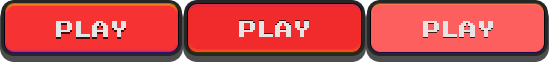
<style>
.page{position:relative;width:549px;height:62px;background:#fd5f5f}
.page>*{position:absolute;margin:0}
.t1{font:18px "PressStart2P";color:#e5e5e5}
</style>
<div class="page">
<p class="t1" style="left:56px;top:21px;width:70px;height:16px">PLAY</p>
<p class="t1" style="left:239px;top:21px;width:70px;height:16px">PLAY</p>
<p class="t1" style="left:423px;top:21px;width:70px;height:16px">PLAY</p>
</div>
